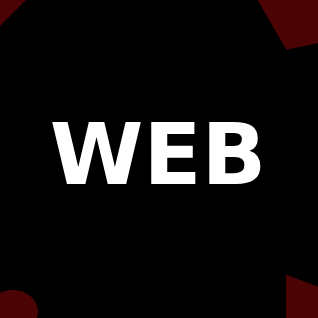
<style>
.page{position:relative;width:318px;height:318px;background:#000000}
.page>*{position:absolute;margin:0}
.t1{font:85px "DejaVuSans-Bold";color:#ffffff}
</style>
<div class="page">
<p class="t1" style="left:52px;top:122px;width:209px;height:62px">WEB</p>
</div>
